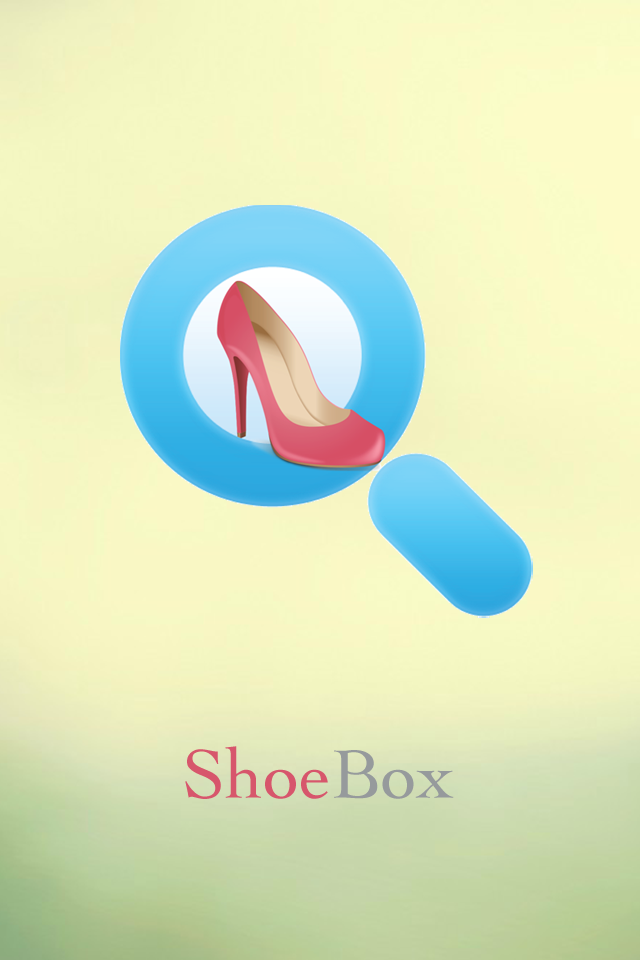
<style>
.page{position:relative;width:640px;height:960px}
.page>*{position:absolute;margin:0}
.t1{font:72px "Cochin";color:#d7566c}
.t2{font:72px "Cochin";color:#969a9c}
</style>
<div class="page">
<p class="t1" style="left:185px;top:746px;width:269px;height:53px">Shoe<span class="t2">Box</span></p>
</div>
